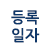
<style>
.page{position:relative;width:50px;height:50px;background:#ffffff}
.page>*{position:absolute;margin:0}
.t1{font:15px "NanumGothicBold";color:#0e3769}
</style>
<div class="page">
<p class="t1" style="left:11px;top:10px;width:29px;height:33px">등록<br>일자</p>
</div>
